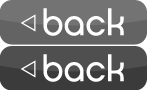
<style>
.page{position:relative;width:147px;height:90px;background:#737373}
.page>*{position:absolute;margin:0}
.t1{font:36px "Chalet-LondonNineteenSeventy";color:#ffffff}
.t2{font:20px "Wingdings3";color:#ffffff}
</style>
<div class="page">
<p class="t1" style="left:20px;top:8px;width:104px;height:28px"><span class="t2">v</span>back</p>
<p class="t1" style="left:20px;top:54px;width:104px;height:28px"><span class="t2">v</span>back</p>
</div>
